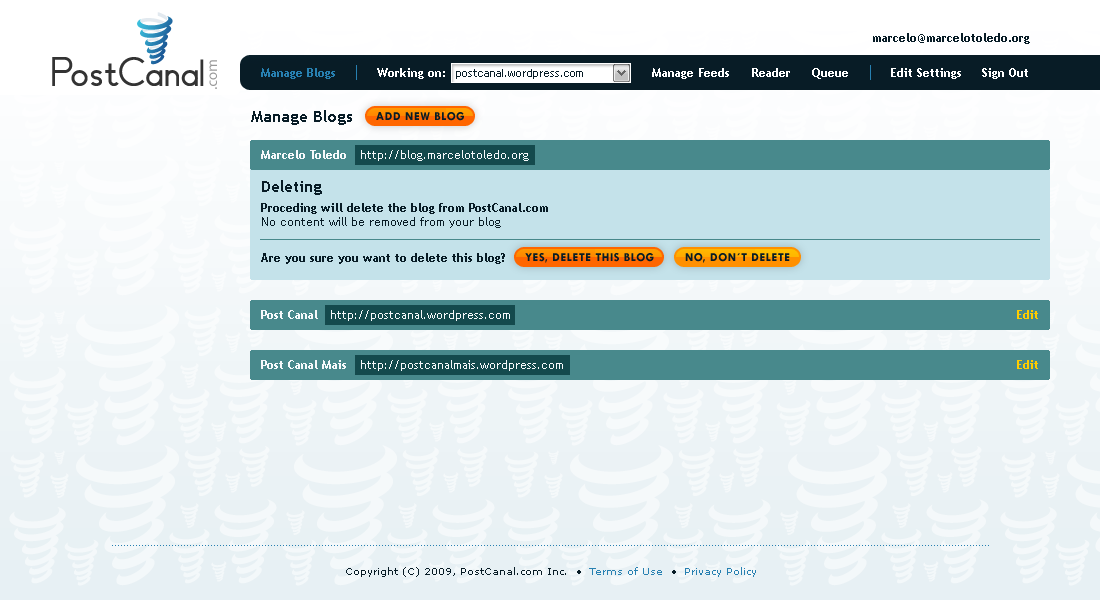
<style>
.page{position:relative;width:1100px;height:600px}
.page>*{position:absolute;margin:0}
.t1{font:12px "TrebuchetMS-Bold";color:#081c26}
.t2{font:12px "TrebuchetMS-Bold";color:#2780b1}
.t3{font:12px "TrebuchetMS-Bold";color:#ffffff}
.t4{font:11px "TrebuchetMS";color:#081c26}
.t5{font:16px "TrebuchetMS-Bold";color:#081c26}
.t6{font:12px "TwCenMT-Bold";letter-spacing:0.05em;color:#081c26;text-transform:uppercase}
.t7{font:12px "TrebuchetMS-Bold";color:#f6f9fb}
.t8{font:12px "TrebuchetMS";color:#f6f9fb}
.t9{font:12px "TrebuchetMS";color:#081c26}
.t10{font:12px "TrebuchetMS-Bold";color:#ffcc00}
.t11{font:10px "Verdana";color:#081c26}
.t12{font:10px "Verdana";color:#2780b1}
</style>
<div class="page">
<p class="t1" style="left:873px;top:33px;width:157px;height:11px">marcelo@marcelotoledo.org</p>
<p class="t2" style="left:261px;top:68px;width:74px;height:11px">Manage Blogs</p>
<p class="t3" style="left:377px;top:68px;width:68px;height:11px">Working on:</p>
<p class="t4" style="left:456px;top:69px;width:127px;height:10px">postcanal.wordpress.com</p>
<p class="t3" style="left:652px;top:68px;width:77px;height:11px">Manage Feeds</p>
<p class="t3" style="left:752px;top:68px;width:38px;height:9px">Reader</p>
<p class="t3" style="left:812px;top:68px;width:36px;height:11px">Queue</p>
<p class="t3" style="left:891px;top:68px;width:70px;height:11px">Edit Settings</p>
<p class="t3" style="left:982px;top:68px;width:46px;height:11px">Sign Out</p>
<p class="t5" style="left:251px;top:110px;width:101px;height:15px">Manage Blogs</p>
<p class="t6" style="left:376px;top:112px;width:88px;height:9px">Add new blog</p>
<p class="t7" style="left:261px;top:150px;width:85px;height:9px">Marcelo Toledo</p>
<p class="t8" style="left:361px;top:150px;width:168px;height:11px">http://blog.marcelotoledo.org</p>
<p class="t5" style="left:262px;top:180px;width:60px;height:15px">Deleting</p>
<p class="t1" style="left:261px;top:203px;width:287px;height:25px">Proceding will delete the blog from PostCanal.com<br><span class="t9">No content will be removed from your blog</span></p>
<p class="t1" style="left:261px;top:253px;width:244px;height:11px">Are you sure you want to delete this blog?</p>
<p class="t6" style="left:525px;top:253px;width:129px;height:10px">yes, delete this blog</p>
<p class="t6" style="left:685px;top:253px;width:105px;height:10px">no, don´t delete</p>
<p class="t7" style="left:261px;top:310px;width:57px;height:9px">Post Canal</p>
<p class="t8" style="left:331px;top:310px;width:179px;height:11px">http://postcanal.wordpress.com</p>
<p class="t10" style="left:1017px;top:310px;width:21px;height:9px">Edit</p>
<p class="t7" style="left:261px;top:360px;width:85px;height:9px">Post Canal Mais</p>
<p class="t8" style="left:361px;top:360px;width:202px;height:11px">http://postcanalmais.wordpress.com</p>
<p class="t10" style="left:1017px;top:360px;width:21px;height:9px">Edit</p>
<p class="t11" style="left:346px;top:567px;width:410px;height:10px">Copyright (C) 2009, PostCanal.com Inc.  • <span class="t12"> Terms of Use</span>  •  <span class="t12">Privacy Policy</span></p>
</div>
